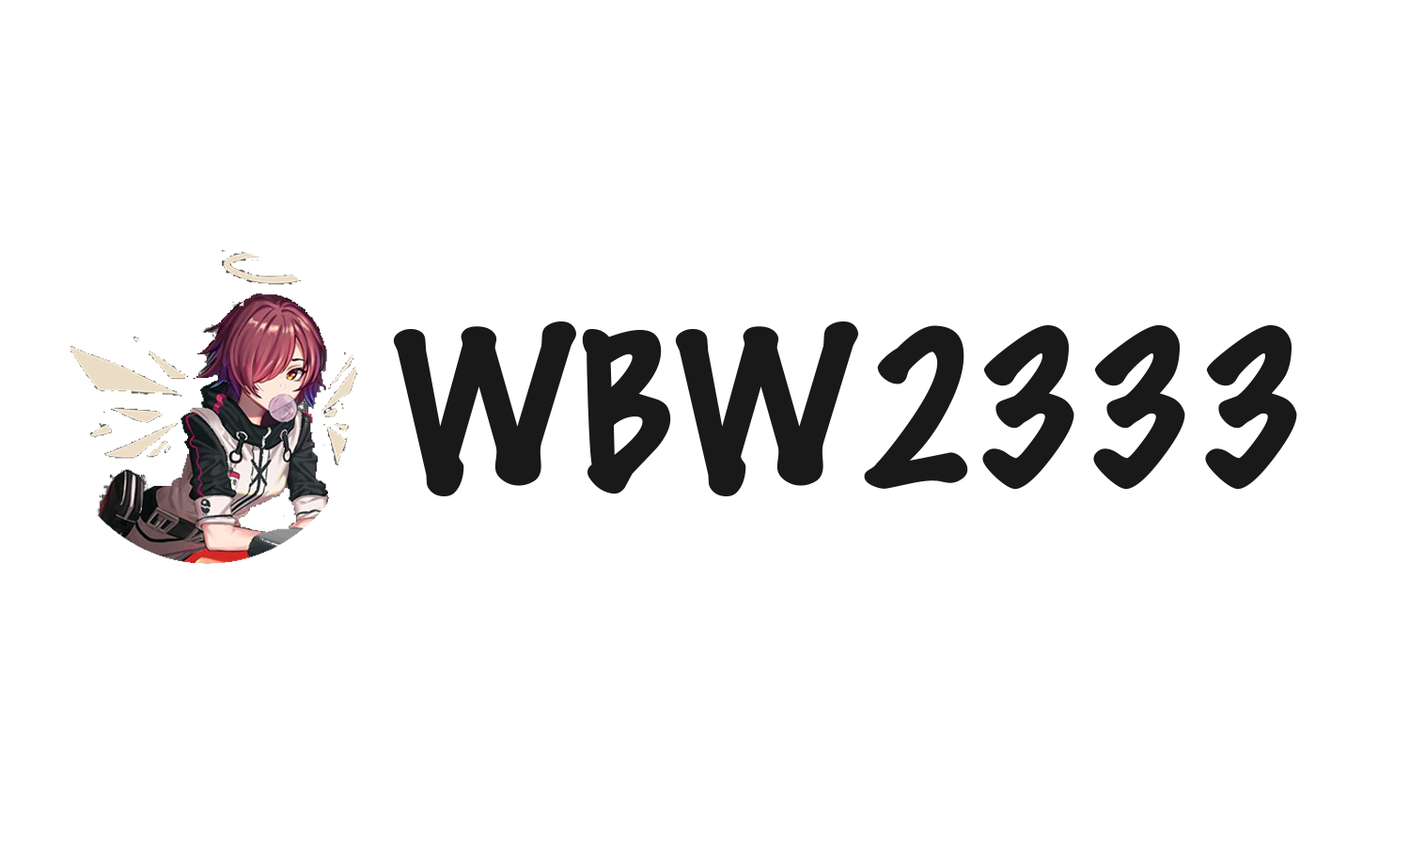
<style>
.page{position:relative;width:1410px;height:846px;background:#ffffff}
.page>*{position:absolute;margin:0}
.t1{font:195.9px "MarkerFelt-Thin";color:#191919}
</style>
<div class="page">
<p class="t1" style="left:393px;top:321px;width:904px;height:175px">WBW2333</p>
</div>
